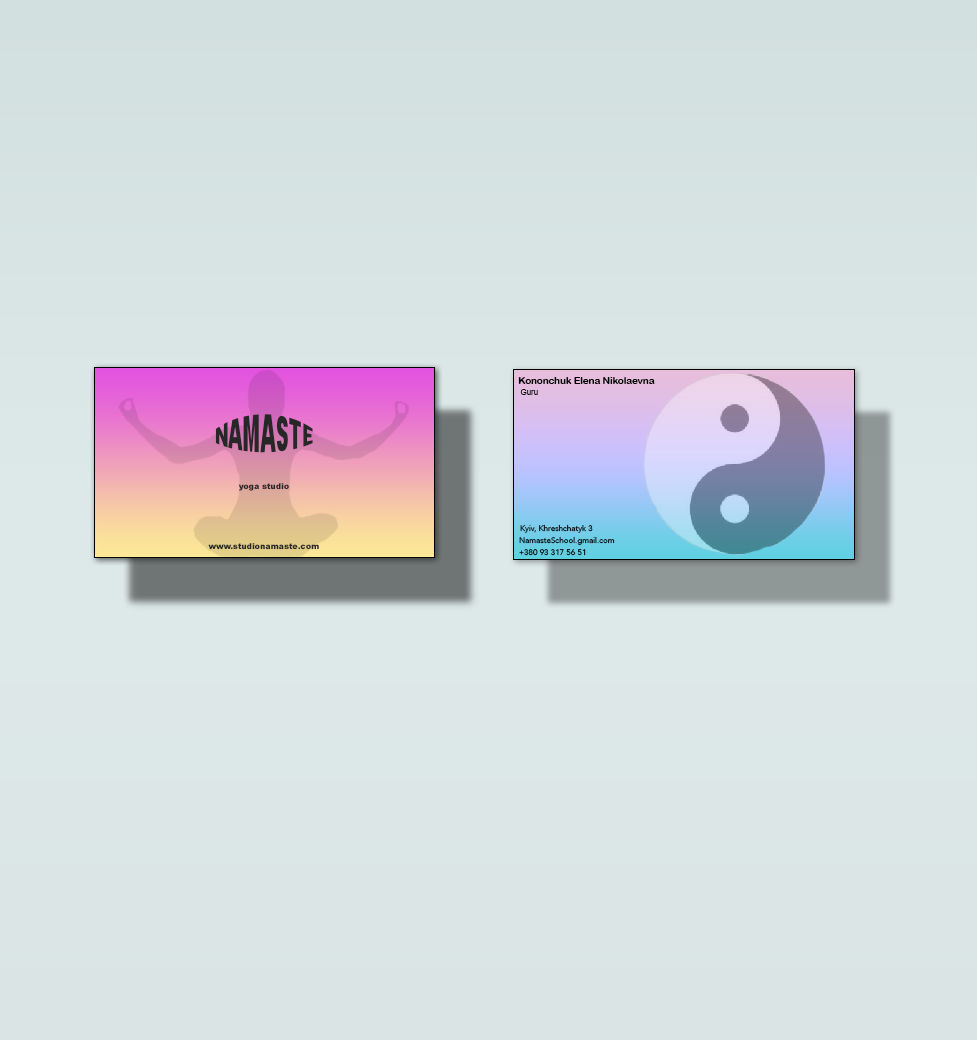
<style>
.page{position:relative;width:977px;height:1040px}
.page>*{position:absolute;margin:0}
.t1{font:9.7px "ArialRoundedMTBold";color:#000000}
.t2{font:8px "ArialMT";color:#000000}
.t3{font:18px/14.2px "Arial-Black";color:#282728}
.t4{font:8px "Arial-Black";color:#282728}
.t5{font:8px "Avenir-Roman"}
</style>
<div class="page">
<p class="t1" style="left:518px;top:377px;width:137px;height:7px">Kononchuk Elena Nikolaevna</p>
<p class="t2" style="left:520px;top:389px;width:18px;height:6px">Guru</p>
<p class="t3" style="left:215px;top:414px;width:98px;height:39px;text-align:center">NAMASTE</p>
<p class="t4" style="left:238px;top:483px;width:51px;height:8px">yoga studio</p>
<p class="t5" style="left:520px;top:524px;width:73px;height:9px">Kyiv, Khreshchatyk 3</p>
<p class="t4" style="left:208px;top:543px;width:111px;height:7px">www.studionamaste.com</p>
<p class="t5" style="left:519px;top:536px;width:96px;height:9px">NamasteSchool.gmail.com</p>
<p class="t5" style="left:519px;top:549px;width:67px;height:7px">+380 93 317 56 51</p>
</div>
